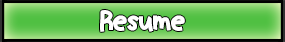
<style>
.page{position:relative;width:285px;height:42px}
.page>*{position:absolute;margin:0}
.t1{font:32px "Animated";color:#ffffff}
</style>
<div class="page">
<p class="t1" style="left:100px;top:10px;width:85px;height:22px">Resume</p>
</div>
